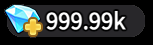
<style>
.page{position:relative;width:153px;height:45px;background:#000000}
.page>*{position:absolute;margin:0}
.t1{font:22px "WebPSD-18463539-0-Regular";color:#ffffff;font-weight:bold}
</style>
<div class="page">
<p class="t1" style="left:44px;top:5px;width:101px;height:32px">999.99k</p>
</div>
